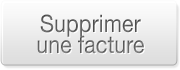
<style>
.page{position:relative;width:180px;height:70px}
.page>*{position:absolute;margin:0}
.t1{font:24px/20.3px "HelveticaNeue";color:#626262;scale:0.9 1}
</style>
<div class="page">
<p class="t1" style="left:37px;top:14px;width:107px;height:40px;text-align:center">Supprimer<br>une facture</p>
</div>
